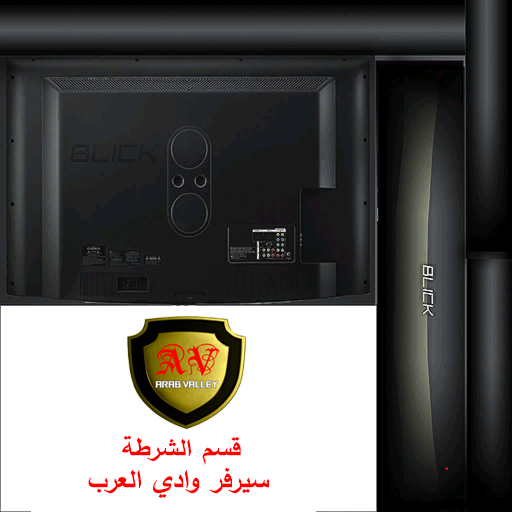
<style>
.page{position:relative;width:512px;height:512px;background:#ffffff}
.page>*{position:absolute;margin:0}
.t1{font:26.5px "SimplifiedArabic-Bold";color:#fe0000;scale:1.16 1}
.t2{font:28.1px "SimplifiedArabic-Bold";color:#fe0000;scale:1.11 1}
</style>
<div class="page">
<p class="t1" style="left:122px;top:435px;width:119px;height:30px">قسم الشرطة</p>
<p class="t2" style="left:88px;top:467px;width:181px;height:32px">سيرفر وادي العرب</p>
</div>
